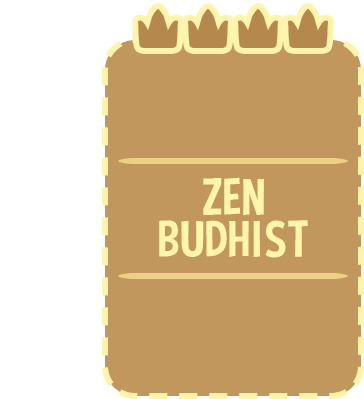
<style>
.page{position:relative;width:364px;height:399px;background:#c2975e}
.page>*{position:absolute;margin:0}
.t1{font:52px/42px "CurseCasualRegular";color:#fff5ae;text-transform:uppercase}
</style>
<div class="page">
<p class="t1" style="left:159px;top:177px;width:149px;height:81px;text-align:center">ZEN<br>BUDHIST</p>
</div>
